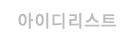
<style>
.page{position:relative;width:134px;height:40px;background:#ffffff}
.page>*{position:absolute;margin:0}
.t1{font:18px "YDIYGO130-KSCPC-EUC-H";color:#bdbcbc;font-weight:bold;scale:0.9 1}
</style>
<div class="page">
<p class="t1" style="left:18px;top:12px;width:98px;height:17px">아이디리스트</p>
</div>
